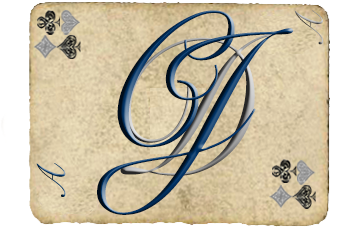
<style>
.page{position:relative;width:360px;height:234px;background:#ffffff}
.page>*{position:absolute;margin:0}
.t1{font:187.5px "SnellRoundhand";scale:0.92 1}
.t2{font:38.8px "SnellRoundhand";scale:0.88 1}
.t3{font:187.6px "SnellRoundhand";scale:0.91 1}
.t4{font:39.6px "SnellRoundhand";scale:0.87 1}
</style>
<div class="page">
<p class="t1" style="left:117px;top:10px;width:118px;height:138px">C</p>
<p class="t2" style="left:294px;top:10px;width:29px;height:35px;rotate:-90deg">A</p>
<p class="t3" style="left:97px;top:28px;width:197px;height:187px">J</p>
<p class="t4" style="left:36px;top:163px;width:30px;height:34px;rotate:-90deg">A</p>
</div>
